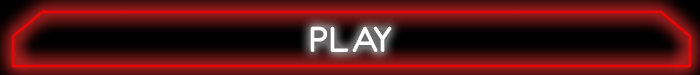
<style>
.page{position:relative;width:700px;height:75px}
.page>*{position:absolute;margin:0}
.t1{font:36px "Neon80s";color:#ffffff}
</style>
<div class="page">
<p class="t1" style="left:310px;top:26px;width:82px;height:26px">PLAY</p>
</div>
